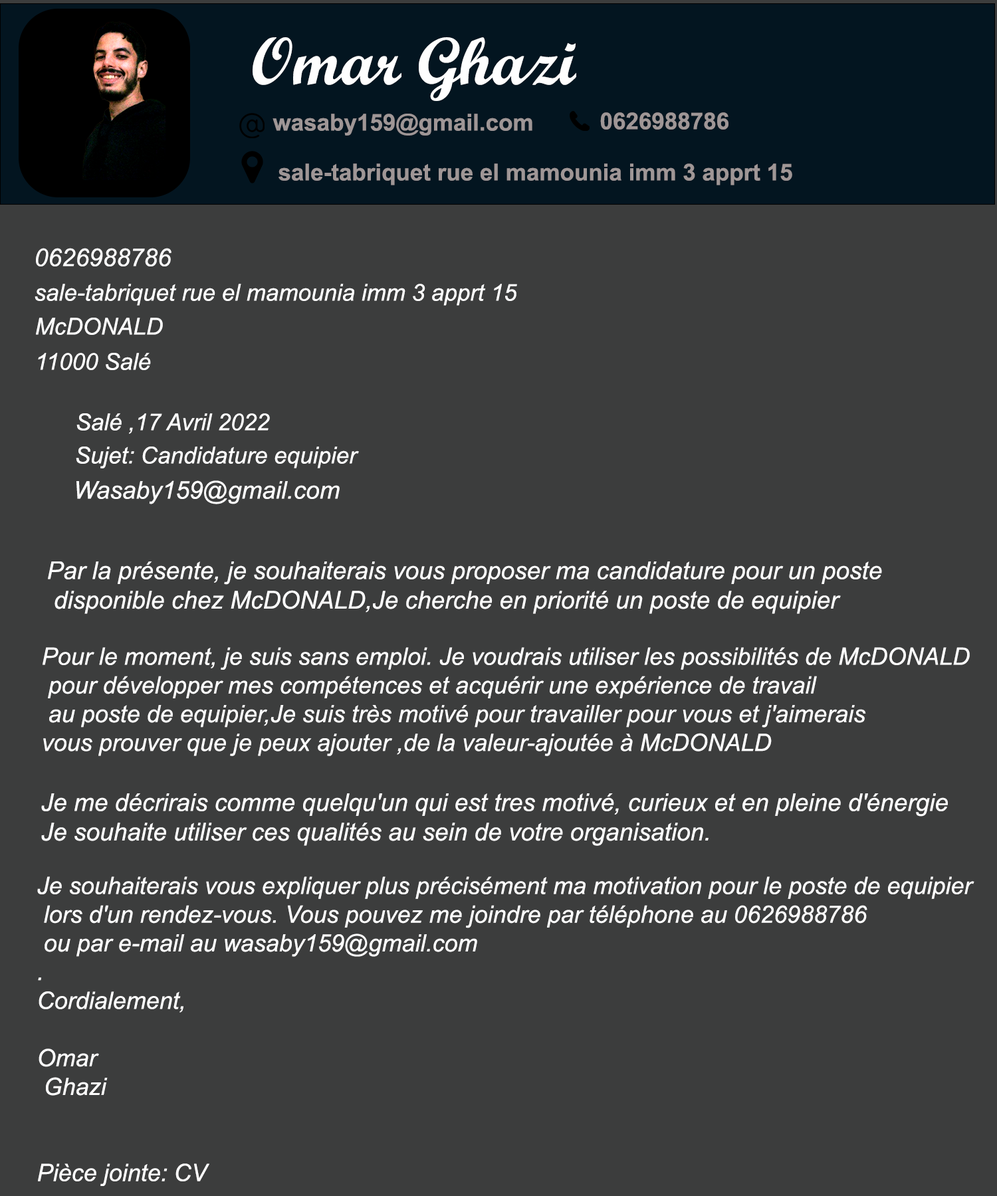
<style>
.page{position:relative;width:997px;height:1196px;background:#3c3d3d}
.page>*{position:absolute;margin:0}
.t1{font:67.1px "ScriptMTBold";color:#fefefe}
.t2{font:23.3px "Arial-BoldMT";color:#9f9696}
.t3{font:24.6px "Arial-ItalicMT";color:#fefefe}
.t4{font:23.3px "Arial-ItalicMT";color:#ffffff}
.t5{font:23.9px "Arial-ItalicMT";color:#fefefe}
</style>
<div class="page">
<p class="t1" style="left:253px;top:37px;width:323px;height:64px">Omar Ghazi</p>
<p class="t2" style="left:272px;top:114px;width:260px;height:22px">wasaby159@gmail.com</p>
<p class="t2" style="left:600px;top:112px;width:128px;height:18px">0626988786</p>
<p class="t2" style="left:278px;top:163px;width:514px;height:22px">sale-tabriquet rue el mamounia imm 3 apprt 15</p>
<p class="t3" style="left:36px;top:248px;width:135px;height:18px">0626988786</p>
<p class="t4" style="left:35px;top:284px;width:482px;height:22px">sale-tabriquet rue el mamounia imm 3 apprt 15</p>
<p class="t4" style="left:36px;top:318px;width:127px;height:17px">McDONALD</p>
<p class="t4" style="left:38px;top:353px;width:113px;height:17px">11000 Salé</p>
<p class="t4" style="left:76px;top:413px;width:194px;height:21px">Salé ,17 Avril 2022</p>
<p class="t4" style="left:76px;top:447px;width:283px;height:22px">Sujet: Candidature equipier</p>
<p class="t3" style="left:76px;top:480px;width:264px;height:24px">Wasaby159@gmail.com</p>
<p class="t3" style="left:48px;top:562px;width:834px;height:52px">Par la présente, je souhaiterais vous proposer ma candidature pour un poste<br> disponible chez McDONALD,Je cherche en priorité un poste de equipier</p>
<p class="t5" style="left:43px;top:647px;width:927px;height:109px">Pour le moment, je suis sans emploi. Je voudrais utiliser les possibilités de McDONALD<br> pour développer mes compétences et acquérir une expérience de travail<br> au poste de equipier,Je suis très motivé pour travailler pour vous et j'aimerais <br>vous prouver que je peux ajouter ,de la valeur-ajoutée à McDONALD</p>
<p class="t3" style="left:41px;top:793px;width:907px;height:53px">Je me décrirais comme quelqu'un qui est tres motivé, curieux et en pleine d'énergie<br>Je souhaite utiliser ces qualités au sein de votre organisation.</p>
<p class="t5" style="left:37px;top:877px;width:937px;height:309px">Je souhaiterais vous expliquer plus précisément ma motivation pour le poste de equipier<br> lors d'un rendez-vous. Vous pouvez me joindre par téléphone au 0626988786<br> ou par e-mail au wasaby159@gmail.com<br>.<br>Cordialement,<br><br>Omar<br> Ghazi<br><br><br>Pièce jointe: CV</p>
</div>
